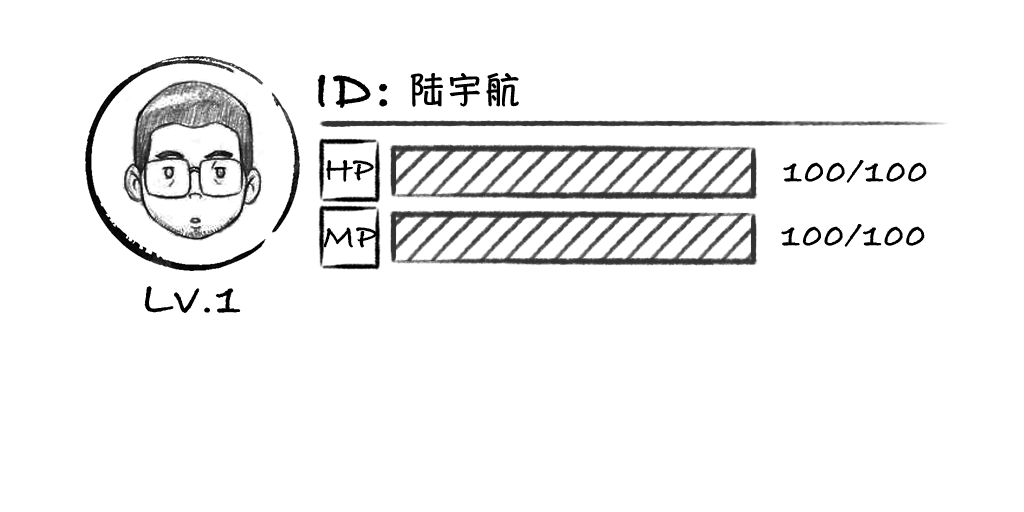
<style>
.page{position:relative;width:1024px;height:512px;background:#ffffff}
.page>*{position:absolute;margin:0}
.t1{font:60px "BradleyHandITCTT-Bold";letter-spacing:0.055em;color:#000000}
.t2{font:36px "HannotateSC-W7";letter-spacing:0.055em;color:#000000}
.t3{font:36px "BradleyHandITCTT-Bold";letter-spacing:0.055em;color:#000000}
.t4{font:48px "BradleyHandITCTT-Bold";letter-spacing:0.055em;color:#000000}
</style>
<div class="page">
<p class="t1" style="left:317px;top:74px;width:71px;height:34px">ID:</p>
<p class="t2" style="left:410px;top:73px;width:109px;height:34px">陆宇航</p>
<p class="t3" style="left:326px;top:160px;width:48px;height:22px">HP</p>
<p class="t3" style="left:783px;top:160px;width:144px;height:23px">100/100</p>
<p class="t3" style="left:323px;top:227px;width:55px;height:21px">MP</p>
<p class="t3" style="left:781px;top:224px;width:144px;height:23px">100/100</p>
<p class="t4" style="left:144px;top:286px;width:97px;height:27px">Lv.1</p>
</div>
